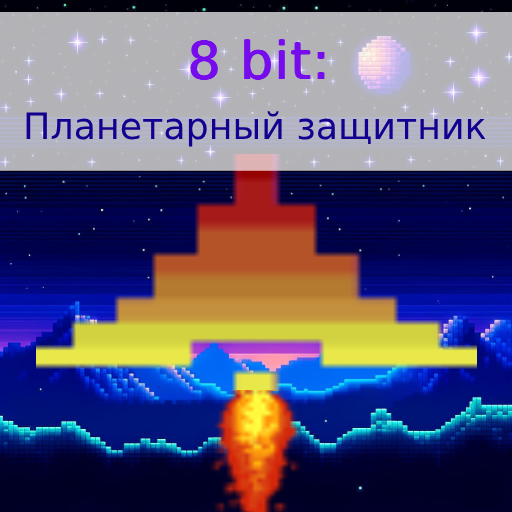
<style>
.page{position:relative;width:512px;height:512px}
.page>*{position:absolute;margin:0}
.t1{font:52.1px "DejaVuSans";color:#760bed;font-weight:bold}
.t2{font:36.4px "DejaVuSans";color:#130090}
</style>
<div class="page">
<p class="t1" style="left:190px;top:39px;width:135px;height:41px">8 bit:</p>
<p class="t2" style="left:26px;top:111px;width:460px;height:36px">Планетарный защитник</p>
</div>
